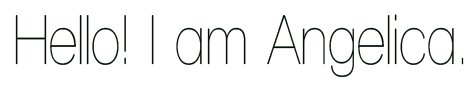
<style>
.page{position:relative;width:470px;height:89px;background:#ffffff}
.page>*{position:absolute;margin:0}
.t1{font:72px "WalkwayCondensed";color:#020e06;scale:1.05 1}
</style>
<div class="page">
<p class="t1" style="left:15px;top:14px;width:449px;height:64px">HeIlo! I am Angelica.</p>
</div>
